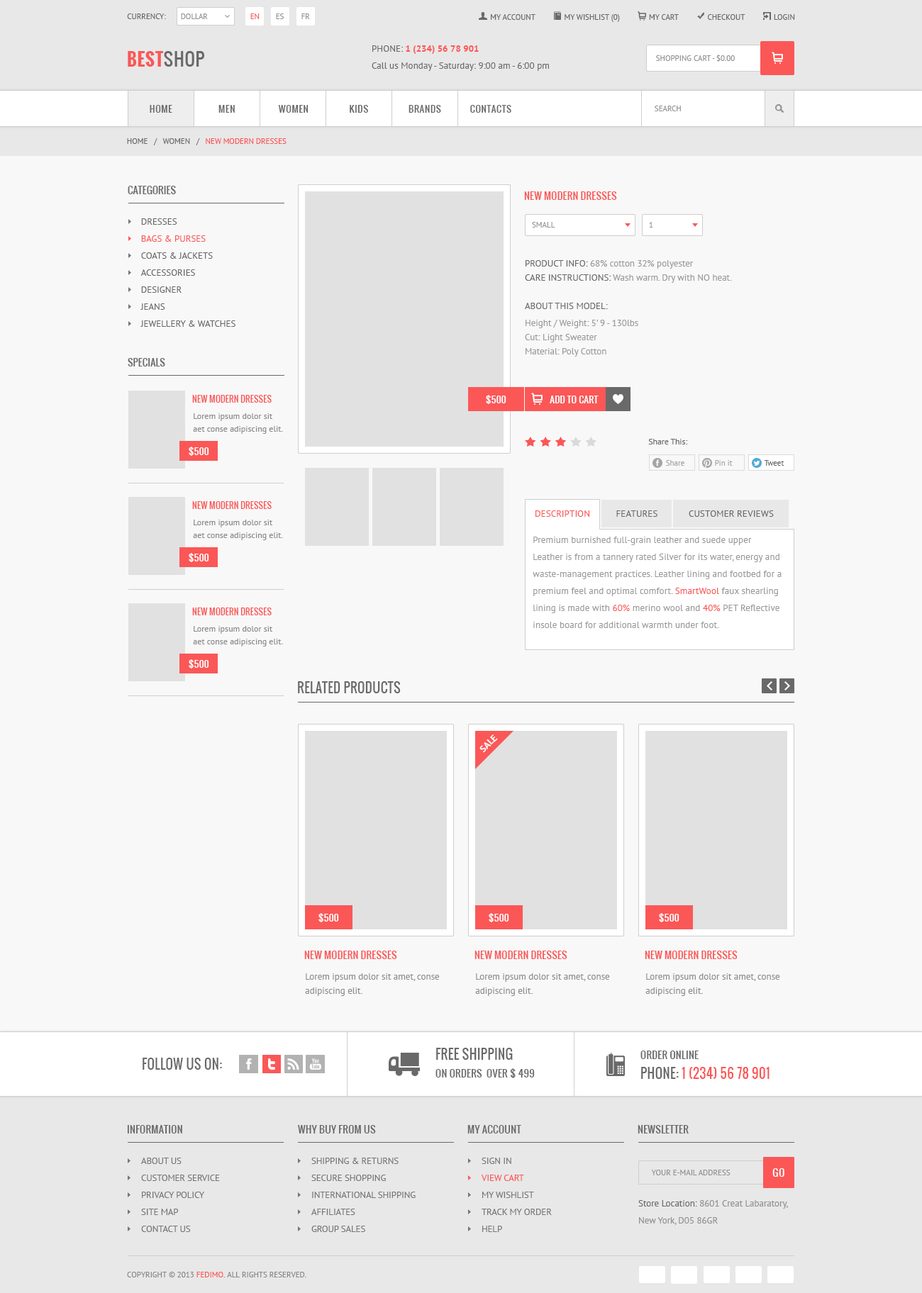
<style>
.page{position:relative;width:922px;height:1293px;background:#f8f8f8}
.page>*{position:absolute;margin:0}
.t1{font:7.8px "PTSans-Regular";color:#696969;text-transform:uppercase}
.t2{font:7.8px "PTSans-Regular";color:#939393;text-transform:uppercase}
.t3{font:7.8px "PTSans-Regular";color:#fb5757;text-transform:uppercase}
.t4{font:17.7px "Oswald-Bold";letter-spacing:0.025em;color:#fb5757;text-transform:uppercase}
.t5{font:17.7px "Oswald-Regular";letter-spacing:0.025em;color:#696969;text-transform:uppercase}
.t6{font:9.2px/17px "PTSans-Regular";color:#696969}
.t7{font:9.2px/17px "PTSans-Regular";color:#696969;text-transform:uppercase}
.t8{font:9.2px/17px "PTSans-Bold";color:#fb5757;text-transform:uppercase}
.t9{font:9.2px "Oswald-Regular";letter-spacing:0.05em;color:#696969;text-transform:uppercase}
.t10{font:9.9px "Oswald-Regular";letter-spacing:0.015em;color:#696969;text-transform:uppercase}
.t11{font:9.9px "Oswald-Regular";letter-spacing:0.015em;color:#fb5757;text-transform:uppercase}
.t12{font:9.2px/17px "PTSans-Regular";color:#fb5757;text-transform:uppercase}
.t13{font:7.8px "PTSans-Regular";color:#979797;text-transform:uppercase}
.t14{font:9.2px/14.2px "PTSans-Regular";color:#9a9a9a}
.t15{font:9.2px/14.2px "PTSans-Regular";color:#696969;text-transform:uppercase}
.t16{font:9.2px/17px "PTSans-Regular";color:#9a9a9a}
.t17{font:8.5px "Oswald-Regular";letter-spacing:0.015em;color:#fb5757;text-transform:uppercase}
.t18{font:9.2px "Oswald-Regular";letter-spacing:0.015em;color:#ffffff;text-transform:uppercase}
.t19{font:8.5px/12.8px "PTSans-Regular";color:#8b8b8b}
.t20{font:8.5px "PTSans-Regular";color:#696969}
.t21{font:7.8px "PTSans-Regular";color:#a5a5a5}
.t22{font:7.8px "PTSans-Regular";color:#696969}
.t23{font:9.2px "PTSans-Regular";color:#fb5757;text-transform:uppercase}
.t24{font:9.2px "PTSans-Regular";color:#696969;text-transform:uppercase}
.t25{font:9.2px/17px "PTSans-Regular";color:#fb5757}
.t26{font:12.8px "Oswald-Regular";letter-spacing:0.015em;color:#696969;text-transform:uppercase}
.t27{font:9.2px "PTSans-Bold";color:#ffffff;text-transform:uppercase}
.t28{font:9.2px/14.2px "PTSans-Regular";color:#8b8b8b}
.t29{font:9.9px/17.7px "Oswald-Regular";letter-spacing:0.015em;color:#696969;text-transform:uppercase}
.t30{font:12.8px/19.9px "Oswald-Regular";letter-spacing:0.015em;color:#fb5757;text-transform:uppercase}
.t31{font:12.8px/19.9px "Oswald-Regular";letter-spacing:0.015em;color:#696969;text-transform:uppercase}
.t32{font:9.2px/17px "PTSans-Regular";color:#767676;text-transform:uppercase}
.t33{font:9.9px "Oswald-Regular";letter-spacing:0.05em;color:#ffffff;text-transform:uppercase}
.t34{font:9.2px/17px "PTSans-Regular";color:#8f8f8f}
.t35{font:7.8px "PTSans-Regular";color:#888888;text-transform:uppercase}
</style>
<div class="page">
<p class="t1" style="left:127px;top:13px;width:39px;height:6px">Currency:</p>
<p class="t2" style="left:181px;top:13px;width:27px;height:6px">Dollar</p>
<p class="t3" style="left:250px;top:13px;width:10px;height:6px">En</p>
<p class="t2" style="left:276px;top:13px;width:8px;height:6px">Es</p>
<p class="t2" style="left:301px;top:13px;width:9px;height:6px">Fr</p>
<p class="t1" style="left:491px;top:14px;width:304px;height:8px">My Account              My Wishlist (0)              My Cart              Checkout              Login</p>
<p class="t4" style="left:128px;top:51px;width:76px;height:16px">Best<span class="t5">Shop</span></p>
<p class="t6" style="left:372px;top:45px;width:177px;height:26px"><span class="t7">Phone: </span><span class="t8">1 (234) 56 78 901<br></span>Call us Monday - Saturday: 9:00 am - 6:00 pm</p>
<p class="t2" style="left:656px;top:55px;width:79px;height:7px">Shopping Cart - $0.00</p>
<p class="t9" style="left:150px;top:105px;width:22px;height:8px">Home</p>
<p class="t9" style="left:218px;top:105px;width:17px;height:8px">Men</p>
<p class="t9" style="left:278px;top:105px;width:30px;height:8px">Women</p>
<p class="t9" style="left:350px;top:105px;width:18px;height:8px">Kids</p>
<p class="t9" style="left:408px;top:105px;width:33px;height:8px">Brands</p>
<p class="t9" style="left:470px;top:105px;width:41px;height:8px">Contacts</p>
<p class="t2" style="left:655px;top:106px;width:26px;height:5px">Search</p>
<p class="t1" style="left:127px;top:138px;width:159px;height:7px">Home   /   Women   /   <span class="t3">New Modern Dresses</span></p>
<p class="t10" style="left:128px;top:186px;width:48px;height:8px">Categories</p>
<p class="t11" style="left:524px;top:191px;width:93px;height:9px">New Modern Dresses</p>
<p class="t7" style="left:140px;top:218px;width:95px;height:109px">Dresses<br><span class="t12">Bags &amp; Purses<br></span>Coats &amp; Jackets<br>Accessories<br>Designer<br>Jeans<br>Jewellery &amp; Watches</p>
<p class="t13" style="left:532px;top:222px;width:23px;height:6px">Small</p>
<p class="t13" style="left:649px;top:222px;width:4px;height:6px">1</p>
<p class="t14" style="left:525px;top:260px;width:207px;height:97px"><span class="t15">Product Info: </span>68% cotton 32% polyester<br><span class="t15">Care Instructions: </span>Wash warm. Dry with NO heat.<br><br><span class="t15">About This Model:<br></span><span class="t16">Height / Weight: 5' 9 - 130lbs<br></span>Cut: Light Sweater<br>Material: Poly Cotton</p>
<p class="t10" style="left:128px;top:358px;width:37px;height:9px">Specials</p>
<p class="t17" style="left:192px;top:395px;width:80px;height:8px">New Modern Dresses</p>
<p class="t18" style="left:486px;top:395px;width:20px;height:9px">$500</p>
<p class="t18" style="left:550px;top:396px;width:49px;height:8px">Add To Cart</p>
<p class="t19" style="left:193px;top:413px;width:90px;height:21px">Lorem ipsum dolor sit aet conse adipiscing elit.</p>
<p class="t18" style="left:189px;top:447px;width:20px;height:9px">$500</p>
<p class="t20" style="left:648px;top:439px;width:40px;height:6px">Share This:</p>
<p class="t21" style="left:666px;top:460px;width:18px;height:6px">Share</p>
<p class="t21" style="left:715px;top:460px;width:18px;height:6px">Pin it</p>
<p class="t22" style="left:764px;top:460px;width:20px;height:6px">Tweet</p>
<p class="t17" style="left:192px;top:501px;width:80px;height:8px">New Modern Dresses</p>
<p class="t19" style="left:193px;top:520px;width:90px;height:20px">Lorem ipsum dolor sit aet conse adipiscing elit.</p>
<p class="t23" style="left:535px;top:511px;width:54px;height:6px">Description</p>
<p class="t24" style="left:616px;top:511px;width:41px;height:6px">Features</p>
<p class="t24" style="left:689px;top:511px;width:85px;height:6px">Customer Reviews</p>
<p class="t16" style="left:533px;top:537px;width:248px;height:91px">Premium burnished full-grain leather and suede upper<br>Leather is from a tannery rated Silver for its water, energy and waste-management practices. Leather lining and footbed for a premium feel and optimal comfort. <span class="t25">SmartWool</span> faux shearling lining is made with <span class="t25">60% </span>merino wool and <span class="t25">40%</span> PET Reflective insole board for additional warmth under foot.</p>
<p class="t18" style="left:189px;top:553px;width:20px;height:9px">$500</p>
<p class="t17" style="left:192px;top:608px;width:80px;height:8px">New Modern Dresses</p>
<p class="t19" style="left:193px;top:626px;width:90px;height:21px">Lorem ipsum dolor sit aet conse adipiscing elit.</p>
<p class="t18" style="left:189px;top:660px;width:20px;height:9px">$500</p>
<p class="t26" style="left:298px;top:681px;width:103px;height:13px">Related Products</p>
<p class="t27" style="left:479px;top:735px;width:19px;height:18px;rotate:-45deg">sale</p>
<p class="t18" style="left:318px;top:913px;width:21px;height:10px">$500</p>
<p class="t18" style="left:489px;top:913px;width:20px;height:10px">$500</p>
<p class="t18" style="left:659px;top:913px;width:20px;height:10px">$500</p>
<p class="t11" style="left:304px;top:951px;width:93px;height:8px">New Modern Dresses</p>
<p class="t11" style="left:474px;top:951px;width:93px;height:8px">New Modern Dresses</p>
<p class="t11" style="left:645px;top:951px;width:93px;height:8px">New Modern Dresses</p>
<p class="t28" style="left:305px;top:974px;width:135px;height:22px">Lorem ipsum dolor sit amet, conse<br>adipiscing elit.</p>
<p class="t28" style="left:475px;top:974px;width:135px;height:22px">Lorem ipsum dolor sit amet, conse<br>adipiscing elit.</p>
<p class="t28" style="left:645px;top:974px;width:135px;height:22px">Lorem ipsum dolor sit amet, conse<br>adipiscing elit.</p>
<p class="t29" style="left:435px;top:1048px;width:100px;height:31px"><span class="t26">Free Shipping<br></span>On Orders  Over $ 499</p>
<p class="t26" style="left:143px;top:1058px;width:79px;height:12px">Follow Us On:</p>
<p class="t30" style="left:640px;top:1051px;width:129px;height:28px"><span class="t10">Order Online<br></span><span class="t31">Phone: </span>1 (234) 56 78 901</p>
<p class="t10" style="left:127px;top:1125px;width:55px;height:9px">Information</p>
<p class="t10" style="left:298px;top:1125px;width:78px;height:9px">Why Buy From Us</p>
<p class="t10" style="left:467px;top:1125px;width:54px;height:9px">My Account</p>
<p class="t10" style="left:638px;top:1125px;width:51px;height:9px">Newsletter</p>
<p class="t32" style="left:141px;top:1158px;width:79px;height:74px">About Us<br>Customer Service<br>Privacy Policy<br>Site Map<br>Contact Us</p>
<p class="t32" style="left:311px;top:1158px;width:105px;height:74px">Shipping &amp; Returns<br>Secure Shopping<br>International Shipping<br>Affiliates<br>Group Sales</p>
<p class="t32" style="left:481px;top:1158px;width:71px;height:74px">Sign In<br><span class="t12">View Cart<br></span>My Wishlist<br>Track My Order<br>Help</p>
<p class="t33" style="left:772px;top:1169px;width:12px;height:8px">Go</p>
<p class="t2" style="left:651px;top:1170px;width:79px;height:6px">Your E-mail address</p>
<p class="t34" style="left:638px;top:1201px;width:150px;height:24px"><span class="t6">Store Location:</span> 8601 Creat Labaratory, <br>New York, D05 86GR</p>
<p class="t35" style="left:127px;top:1272px;width:179px;height:6px">Copyright © 2013 <span class="t3">Fedimo</span>. All rights reserved.</p>
</div>
